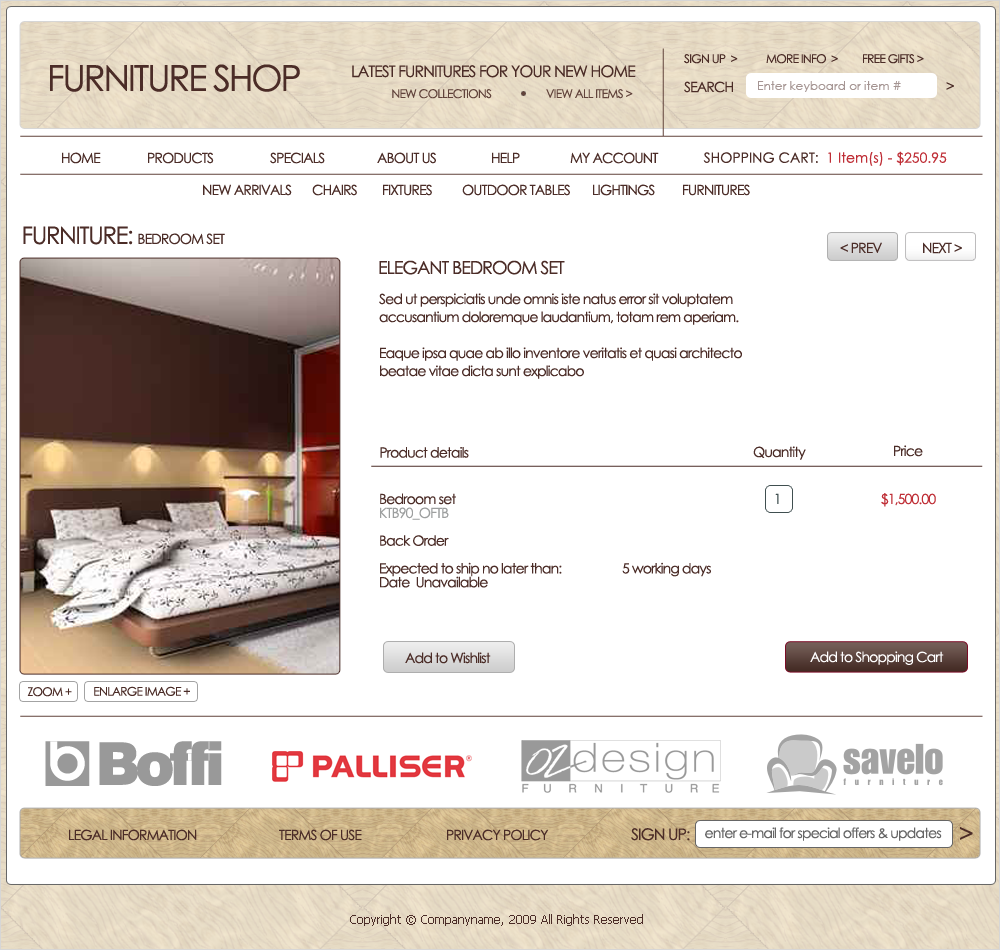
<style>
.page{position:relative;width:1000px;height:950px;background:#ffffff}
.page>*{position:absolute;margin:0}
.t1{font:14px "CenturyGothic";letter-spacing:-0.06em}
.t2{font:12px "CenturyGothic";letter-spacing:-0.06em;color:#4b2c27}
.t3{font:36px "CenturyGothic";letter-spacing:-0.06em;color:#4b2c27}
.t4{font:16px "CenturyGothic";letter-spacing:-0.06em;color:#4b2c27}
.t5{font:12px "CenturyGothic";letter-spacing:-0.06em;color:#61433b}
.t6{font:14px "CenturyGothic";letter-spacing:-0.06em;color:#4b2c27}
.t7{font:12px "CenturyGothic";color:#a59593}
.t8{font:14px "CenturyGothic";color:#bf2f37}
.t9{font:14px "CenturyGothic";color:#4b2c27}
.t10{font:24px "CenturyGothic";letter-spacing:-0.06em;color:#4b2c27}
.t11{font:18px "CenturyGothic";letter-spacing:-0.06em;color:#4b2c27}
.t12{font:14px/18px "CenturyGothic";letter-spacing:-0.06em;color:#4b2c27}
.t13{font:14px/13.9px "CenturyGothic";letter-spacing:-0.06em;color:#4b2c27}
.t14{font:14px/13.9px "CenturyGothic";letter-spacing:-0.06em;color:#404f50}
.t15{font:14px/13.9px "CenturyGothic";letter-spacing:-0.06em;color:#bf2f37}
.t16{font:14px/13.9px "CenturyGothic";letter-spacing:-0.06em;color:#9d9f9f}
.t17{font:14px "CenturyGothic";letter-spacing:-0.06em;color:#ffffff}
.t18{font:14px "CenturyGothic";letter-spacing:-0.06em;color:#666666}
.t19{font:12px "Tahoma";color:#4b2c27}
</style>
<div class="page">
<p class="t1" style="left:662px;top:48px;width:2px;height:88px;rotate:90deg">______________</p>
<p class="t2" style="left:684px;top:54px;width:54px;height:10px">SIGN UP  &gt;</p>
<p class="t2" style="left:766px;top:54px;width:72px;height:10px">MORE INFO  &gt;</p>
<p class="t2" style="left:863px;top:54px;width:61px;height:10px">FREE GIFTS &gt;</p>
<p class="t3" style="left:50px;top:64px;width:250px;height:28px">FURNITURE SHOP</p>
<p class="t4" style="left:352px;top:65px;width:284px;height:13px">LATEST FURNITURES FOR YOUR NEW HOME</p>
<p class="t5" style="left:392px;top:89px;width:100px;height:10px">NEW COLLECTIONS</p>
<p class="t5" style="left:546px;top:89px;width:87px;height:10px">VIEW ALL ITEMS &gt;</p>
<p class="t6" style="left:684px;top:81px;width:49px;height:12px">SEARCH</p>
<p class="t7" style="left:758px;top:81px;width:143px;height:11px">Enter keyboard or item #</p>
<p class="t6" style="left:946px;top:82px;width:8px;height:8px">&gt;</p>
<p class="t1" style="left:20px;top:135px;width:963px;height:2px">____________________________________________________________________________________________________________________________________________________________</p>
<p class="t6" style="left:62px;top:152px;width:39px;height:12px">HOME</p>
<p class="t6" style="left:148px;top:152px;width:66px;height:12px">PRODUCTS</p>
<p class="t6" style="left:270px;top:152px;width:55px;height:12px">SPECIALS</p>
<p class="t6" style="left:377px;top:152px;width:59px;height:12px">ABOUT US</p>
<p class="t6" style="left:492px;top:152px;width:28px;height:11px">HELP</p>
<p class="t6" style="left:570px;top:152px;width:89px;height:12px">MY ACCOUNT</p>
<p class="t8" style="left:703px;top:151px;width:244px;height:15px"><span class="t9">SHOPPING CART:  </span>1 Item(s) - $250.95</p>
<p class="t1" style="left:20px;top:173px;width:963px;height:2px">____________________________________________________________________________________________________________________________________________________________</p>
<p class="t6" style="left:203px;top:184px;width:89px;height:12px">NEW ARRIVALS</p>
<p class="t6" style="left:312px;top:184px;width:45px;height:12px">CHAIRS</p>
<p class="t6" style="left:383px;top:184px;width:49px;height:12px">FIXTURES</p>
<p class="t6" style="left:462px;top:184px;width:108px;height:12px">OUTDOOR TABLES</p>
<p class="t6" style="left:593px;top:184px;width:62px;height:12px">LIGHTINGS</p>
<p class="t6" style="left:683px;top:184px;width:67px;height:12px">FURNITURES</p>
<p class="t6" style="left:23px;top:226px;width:202px;height:19px"><span class="t10">FURNITURE: </span>BEDROOM SET</p>
<p class="t6" style="left:840px;top:242px;width:42px;height:11px">&lt; PREV</p>
<p class="t6" style="left:923px;top:242px;width:39px;height:12px">NEXT &gt;</p>
<p class="t11" style="left:379px;top:260px;width:186px;height:15px">ELEGANT BEDROOM SET</p>
<p class="t12" style="left:379px;top:293px;width:363px;height:86px">Sed ut perspiciatis unde omnis iste natus error sit voluptatem<br>accusantium doloremque laudantium, totam rem aperiam.<br><br>Eaque ipsa quae ab illo inventore veritatis et quasi architecto<br>beatae vitae dicta sunt explicabo</p>
<p class="t6" style="left:380px;top:447px;width:89px;height:11px">Product details</p>
<p class="t6" style="left:753px;top:446px;width:53px;height:14px">Quantity</p>
<p class="t6" style="left:894px;top:445px;width:29px;height:12px">Price</p>
<p class="t1" style="left:371px;top:465px;width:612px;height:2px">___________________________________________________________________________________________________</p>
<p class="t13" style="left:380px;top:493px;width:556px;height:95px">Bedroom set<span class="t14">                                                     1                                 </span><span class="t15">$1,500.00 <br></span><span class="t16">KTB90_OFTB <br><br></span>Back Order<br><br>Expected to ship no later than:                    5 working days<br>Date  Unavailable</p>
<p class="t6" style="left:405px;top:652px;width:86px;height:12px">Add to Wishlist</p>
<p class="t17" style="left:810px;top:651px;width:134px;height:14px">Add to Shopping Cart</p>
<p class="t2" style="left:27px;top:687px;width:45px;height:10px">ZOOM +</p>
<p class="t2" style="left:94px;top:686px;width:96px;height:10px">ENLARGE IMAGE +</p>
<p class="t1" style="left:20px;top:715px;width:963px;height:2px">____________________________________________________________________________________________________________________________________________________________</p>
<p class="t6" style="left:69px;top:829px;width:128px;height:12px">LEGAL INFORMATION</p>
<p class="t6" style="left:279px;top:829px;width:83px;height:12px">TERMS OF USE</p>
<p class="t6" style="left:447px;top:829px;width:102px;height:12px">PRIVACY POLICY</p>
<p class="t4" style="left:631px;top:828px;width:59px;height:13px">SIGN UP:</p>
<p class="t18" style="left:705px;top:827px;width:237px;height:14px">enter e-mail for special offers &amp; updates</p>
<p class="t10" style="left:960px;top:827px;width:13px;height:13px">&gt;</p>
<p class="t19" style="left:350px;top:914px;width:293px;height:12px">Copyright © Companyname, 2009 All Rights Reserved</p>
</div>
